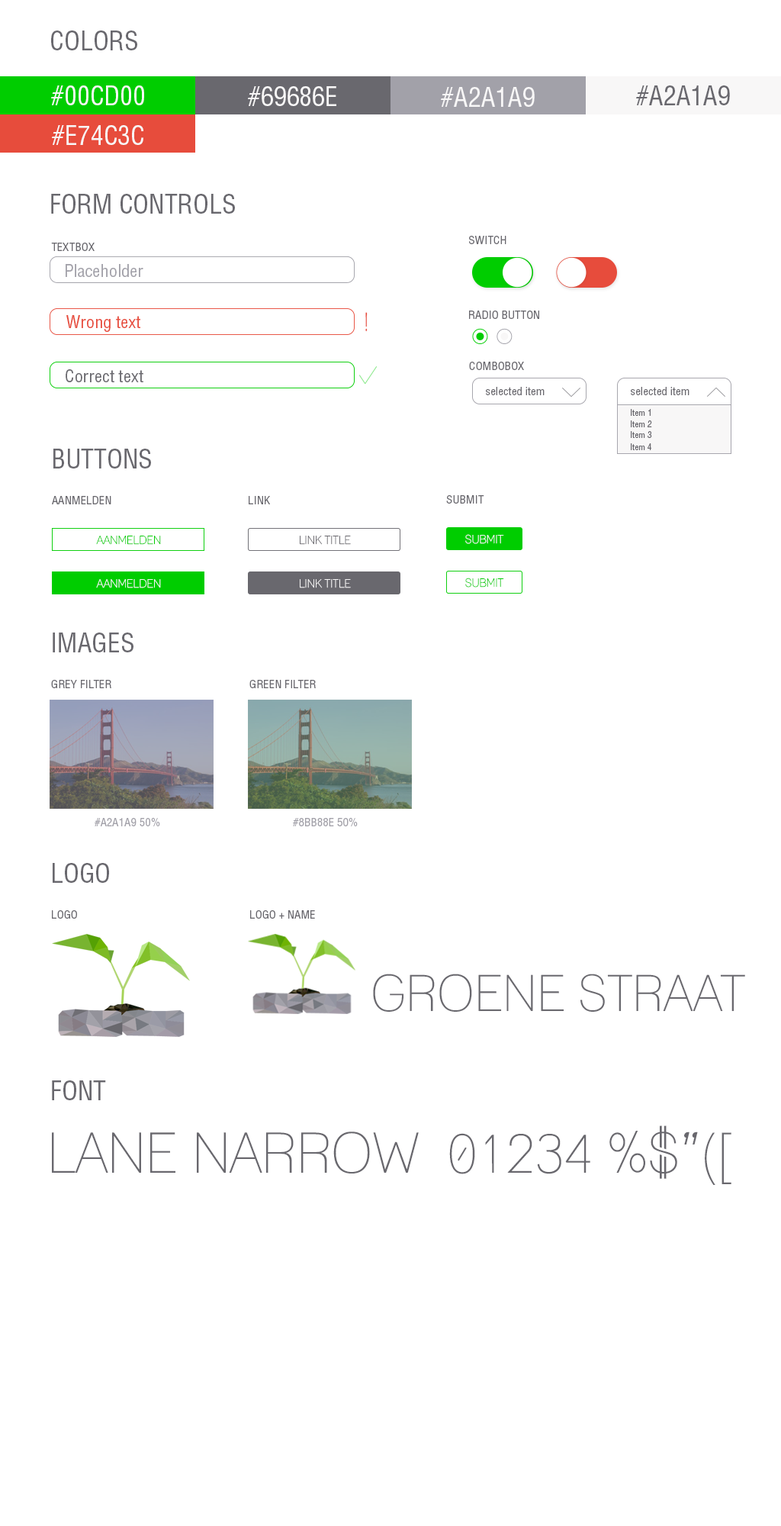
<style>
.page{position:relative;width:781px;height:1526px;background:#ffffff}
.page>*{position:absolute;margin:0}
.t1{font:25.8px "HelveticaLTStd-Cond";color:#69686e}
.t2{font:25.8px "HelveticaLTStd-Cond";color:#f8f7f7}
.t3{font:11.5px "HelveticaLTStd-Cond";color:#69686e}
.t4{font:17.2px "HelveticaLTStd-Cond";color:#a2a1a9}
.t5{font:9.2px "HelveticaLTStd-Cond";color:#e74c3c}
.t6{font:25.8px "Lane-Narrow";color:#e74c3c}
.t7{font:11.6px "HelveticaLTStd-Cond";color:#69686e}
.t8{font:9.2px "HelveticaLTStd-Cond";color:#69686e}
.t9{font:11.4px "HelveticaLTStd-Cond";color:#69686e}
.t10{font:8.6px "HelveticaLTStd-Cond";color:#69686e}
.t11{font:11.4px "Lane-Narrow";color:#00cd00}
.t12{font:11.4px "Lane-Narrow";color:#69686e}
.t13{font:11.4px "Lane-Narrow";color:#f8f7f7}
.t14{font:11.4px "HelveticaLTStd-Cond";color:#a2a1a9}
.t15{font:11.5px "HelveticaLTStd-Cond";color:#a2a1a9}
.t16{font:50.1px "Lane-Narrow";color:#69686e}
.t17{font:55.8px "Lane-Narrow";color:#69686e}
</style>
<div class="page">
<p class="t1" style="left:51px;top:31px;width:86px;height:19px">COLORS</p>
<p class="t2" style="left:51px;top:85px;width:93px;height:20px">#00CD00</p>
<p class="t2" style="left:248px;top:86px;width:89px;height:20px">#69686E</p>
<p class="t2" style="left:441px;top:87px;width:94px;height:20px">#A2A1A9</p>
<p class="t1" style="left:636px;top:85px;width:94px;height:20px">#A2A1A9</p>
<p class="t2" style="left:52px;top:125px;width:91px;height:20px">#E74C3C</p>
<p class="t1" style="left:51px;top:194px;width:184px;height:20px">FORM CONTROLS</p>
<p class="t3" style="left:51px;top:243px;width:44px;height:8px">TEXTBOX</p>
<p class="t3" style="left:469px;top:236px;width:38px;height:8px">SWITCH</p>
<p class="t4" style="left:66px;top:264px;width:77px;height:13px">Placeholder</p>
<p class="t5" style="left:66px;top:315px;width:74px;height:17px">Wrong text</p>
<p class="t6" style="left:366px;top:312px;width:2px;height:20px">!</p>
<p class="t7" style="left:469px;top:311px;width:70px;height:8px">RADIO BUTTON</p>
<p class="t7" style="left:469px;top:362px;width:55px;height:8px">COMBOBOX</p>
<p class="t8" style="left:66px;top:369px;width:77px;height:13px">Correct text</p>
<p class="t9" style="left:486px;top:387px;width:59px;height:8px">selected item</p>
<p class="t9" style="left:631px;top:387px;width:59px;height:8px">selected item</p>
<p class="t10" style="left:631px;top:409px;width:20px;height:7px">Item 1</p>
<p class="t10" style="left:631px;top:420px;width:21px;height:7px">Item 2</p>
<p class="t10" style="left:631px;top:431px;width:21px;height:7px">Item 3</p>
<p class="t1" style="left:53px;top:449px;width:98px;height:20px">BUTTONS</p>
<p class="t10" style="left:631px;top:443px;width:21px;height:7px">Item 4</p>
<p class="t9" style="left:52px;top:496px;width:59px;height:8px">AANMELDEN</p>
<p class="t9" style="left:249px;top:496px;width:21px;height:8px">LINK</p>
<p class="t9" style="left:446px;top:495px;width:39px;height:9px">SUBMIT</p>
<p class="t11" style="left:96px;top:536px;width:65px;height:9px">AANMELDEN</p>
<p class="t12" style="left:300px;top:536px;width:51px;height:9px">LINK TITLE</p>
<p class="t13" style="left:465px;top:534px;width:39px;height:10px">SUBMIT</p>
<p class="t13" style="left:96px;top:579px;width:65px;height:9px">AANMELDEN</p>
<p class="t13" style="left:300px;top:579px;width:51px;height:9px">LINK TITLE</p>
<p class="t11" style="left:465px;top:578px;width:39px;height:10px">SUBMIT</p>
<p class="t1" style="left:53px;top:633px;width:81px;height:19px">IMAGES</p>
<p class="t9" style="left:51px;top:680px;width:60px;height:8px">GREY FILTER</p>
<p class="t3" style="left:250px;top:680px;width:66px;height:8px">GREEN FILTER</p>
<p class="t14" style="left:95px;top:817px;width:65px;height:9px">#A2A1A9 50%</p>
<p class="t15" style="left:293px;top:817px;width:65px;height:9px">#8BB88E 50%</p>
<p class="t1" style="left:53px;top:863px;width:56px;height:20px">LOGO</p>
<p class="t9" style="left:52px;top:910px;width:25px;height:9px">LOGO</p>
<p class="t3" style="left:250px;top:910px;width:65px;height:9px">LOGO + NAME</p>
<p class="t16" style="left:373px;top:974px;width:372px;height:39px">GROENE STRAAT</p>
<p class="t1" style="left:52px;top:1080px;width:54px;height:20px">FONT</p>
<p class="t17" style="left:52px;top:1125px;width:680px;height:60px">LANE NARROW  01234 %$”([</p>
</div>
